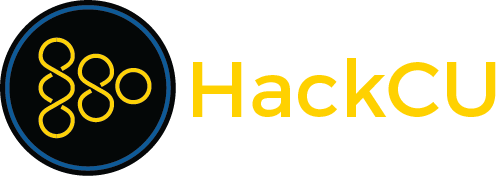
<style>
.page{position:relative;width:502px;height:176px;background:#ffffff}
.page>*{position:absolute;margin:0}
.t1{font:79.2px "Montserrat-Regular";color:#ffd100}
</style>
<div class="page">
<p class="t1" style="left:193px;top:58px;width:303px;height:59px">HackCU</p>
</div>
